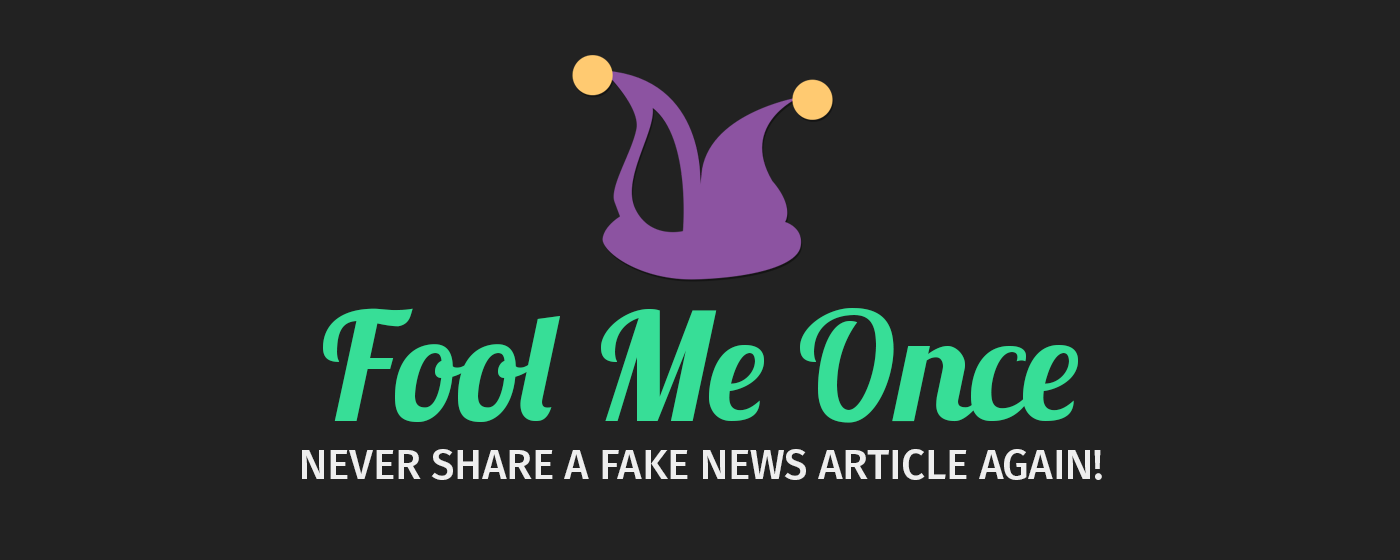
<style>
.page{position:relative;width:1400px;height:560px;background:#222222}
.page>*{position:absolute;margin:0}
.t1{font:150px "Lobster1.3";color:#37de97}
.t2{font:41.7px "FiraSans-Medium";color:#eeeeee;text-transform:uppercase}
</style>
<div class="page">
<p class="t1" style="left:323px;top:308px;width:755px;height:115px">Fool Me Once</p>
<p class="t2" style="left:302px;top:449px;width:800px;height:31px">Never share a fake news article again!</p>
</div>
